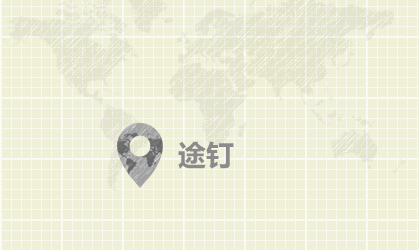
<style>
.page{position:relative;width:419px;height:250px;background:#f0f0d8}
.page>*{position:absolute;margin:0}
.t1{font:28px "MicrosoftYaHei-Bold";color:#8b8b8b}
</style>
<div class="page">
<p class="t1" style="left:178px;top:141px;width:56px;height:28px">途钉</p>
</div>
